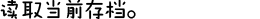
<style>
.page{position:relative;width:260px;height:19px;background:#ffffff}
.page>*{position:absolute;margin:0}
.t1{font:24px "¢è?";color:#000000}
</style>
<div class="page">
<p class="t1" style="left:0px;top:0px;width:136px;height:20px">读取当前存档。</p>
</div>
